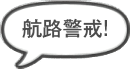
<style>
.page{position:relative;width:130px;height:69px;background:#ffffff}
.page>*{position:absolute;margin:0}
.t1{font:20px "GothicMB101Pr6N-Medium";color:#4c4c4c}
</style>
<div class="page">
<p class="t1" style="left:22px;top:18px;width:85px;height:21px">航路警戒!</p>
</div>
